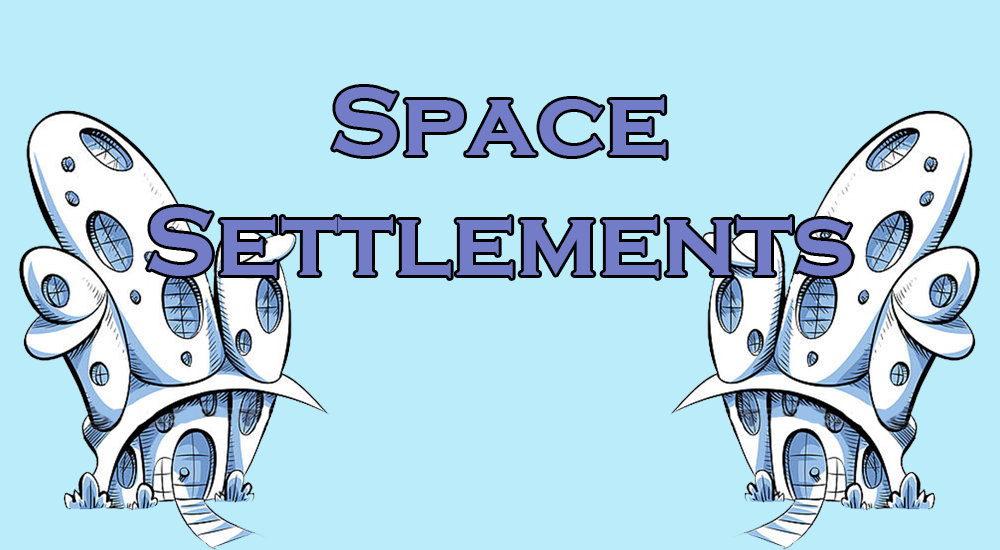
<style>
.page{position:relative;width:1000px;height:550px;background:#bbecfa}
.page>*{position:absolute;margin:0}
.t1{font:100px "CopperplateGothic-Bold";color:#727cc7}
</style>
<div class="page">
<p class="t1" style="left:148px;top:87px;width:704px;height:191px;text-align:center">Space<br>Settlements</p>
</div>
